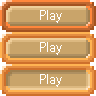
<style>
.page{position:relative;width:96px;height:96px;background:#c9a46a}
.page>*{position:absolute;margin:0}
.t1{font:14px "MyriadPro-Regular";color:#ffffff}
</style>
<div class="page">
<p class="t1" style="left:40px;top:10px;width:22px;height:13px">Play</p>
<p class="t1" style="left:40px;top:42px;width:22px;height:13px">Play</p>
<p class="t1" style="left:40px;top:74px;width:22px;height:13px">Play</p>
</div>
